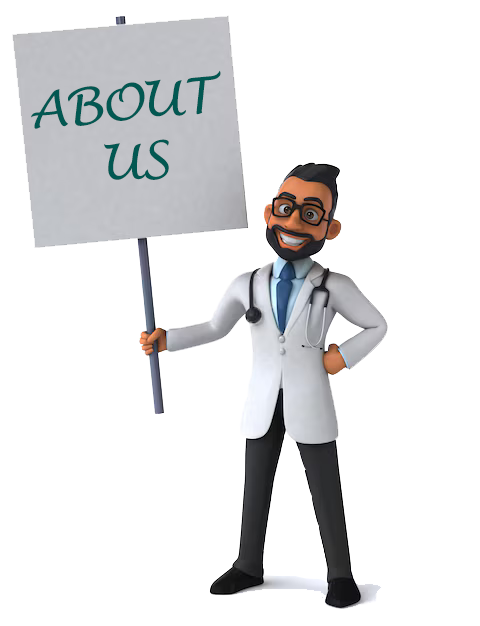
<style>
.page{position:relative;width:480px;height:626px;background:#ffffff}
.page>*{position:absolute;margin:0}
.t1{font:49.7px "LucidaHandwriting-Italic";letter-spacing:-0.05em;color:#025852;text-transform:uppercase}
</style>
<div class="page">
<p class="t1" style="left:31px;top:70px;width:190px;height:110px;text-align:center;rotate:-5deg">ABOUT <br>US</p>
</div>
